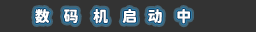
<style>
.page{position:relative;width:256px;height:32px;background:#333333}
.page>*{position:absolute;margin:0}
.t1{font:15px "JiangChengYuanTi-700W";color:#ffffff}
</style>
<div class="page">
<p class="t1" style="left:35px;top:9px;width:155px;height:15px">数    码    机  启   动    中</p>
</div>
